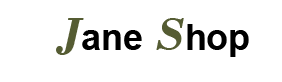
<style>
.page{position:relative;width:282px;height:82px;background:#ffffff}
.page>*{position:absolute;margin:0}
.t1{font:36px "Arial-BoldMT";color:#000000}
.t2{font:48px "BodoniMT-BoldItalic";color:#555c33}
</style>
<div class="page">
<p class="t1" style="left:56px;top:18px;width:193px;height:39px"><span class="t2">J</span>ane <span class="t2">S</span>hop</p>
</div>
